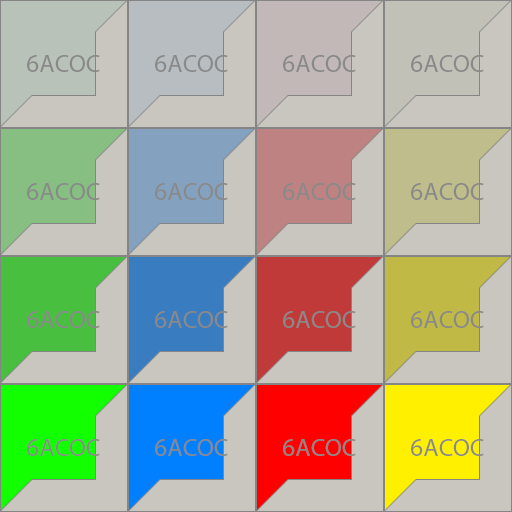
<style>
.page{position:relative;width:512px;height:512px;background:#c8c6bf}
.page>*{position:absolute;margin:0}
.t1{font:25px "MyriadPro-Regular";color:#898989}
</style>
<div class="page">
<p class="t1" style="left:27px;top:55px;width:73px;height:17px">6ACOC</p>
<p class="t1" style="left:155px;top:55px;width:73px;height:17px">6ACOC</p>
<p class="t1" style="left:283px;top:55px;width:73px;height:17px">6ACOC</p>
<p class="t1" style="left:411px;top:55px;width:73px;height:17px">6ACOC</p>
<p class="t1" style="left:27px;top:183px;width:73px;height:17px">6ACOC</p>
<p class="t1" style="left:155px;top:183px;width:73px;height:17px">6ACOC</p>
<p class="t1" style="left:283px;top:183px;width:73px;height:17px">6ACOC</p>
<p class="t1" style="left:411px;top:183px;width:73px;height:17px">6ACOC</p>
<p class="t1" style="left:27px;top:311px;width:73px;height:17px">6ACOC</p>
<p class="t1" style="left:155px;top:311px;width:73px;height:17px">6ACOC</p>
<p class="t1" style="left:283px;top:311px;width:73px;height:17px">6ACOC</p>
<p class="t1" style="left:411px;top:311px;width:73px;height:17px">6ACOC</p>
<p class="t1" style="left:27px;top:439px;width:73px;height:17px">6ACOC</p>
<p class="t1" style="left:155px;top:439px;width:73px;height:17px">6ACOC</p>
<p class="t1" style="left:283px;top:439px;width:73px;height:17px">6ACOC</p>
<p class="t1" style="left:411px;top:439px;width:73px;height:17px">6ACOC</p>
</div>
